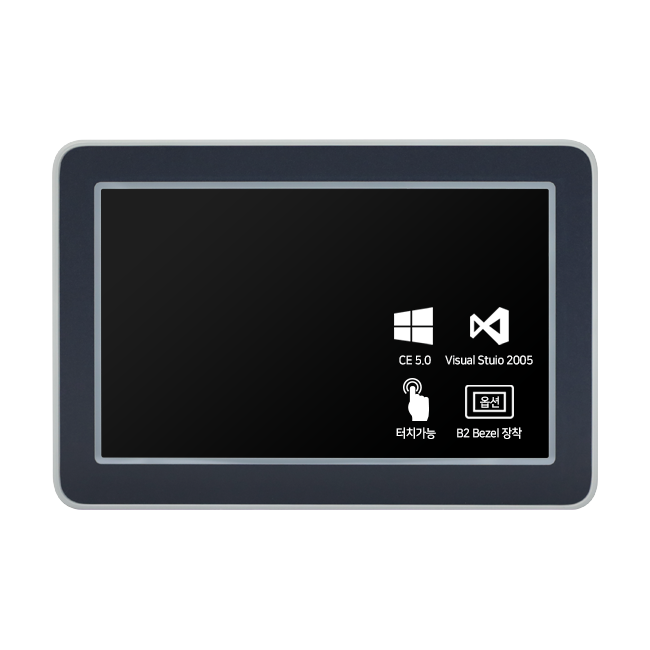
<style>
.page{position:relative;width:650px;height:650px;background:#ffffff}
.page>*{position:absolute;margin:0}
.t1{font:12px "NanumSquareB";letter-spacing:-0.03em;color:#ffffff;scale:0.95 1}
</style>
<div class="page">
<p class="t1" style="left:399px;top:355px;width:32px;height:10px">CE 5.0</p>
<p class="t1" style="left:445px;top:355px;width:88px;height:10px">Visual Stuio 2005</p>
<p class="t1" style="left:480px;top:396px;width:19px;height:12px">옵션</p>
<p class="t1" style="left:396px;top:427px;width:40px;height:12px">터치가능</p>
<p class="t1" style="left:457px;top:427px;width:65px;height:12px">B2 Bezel 장착</p>
</div>
